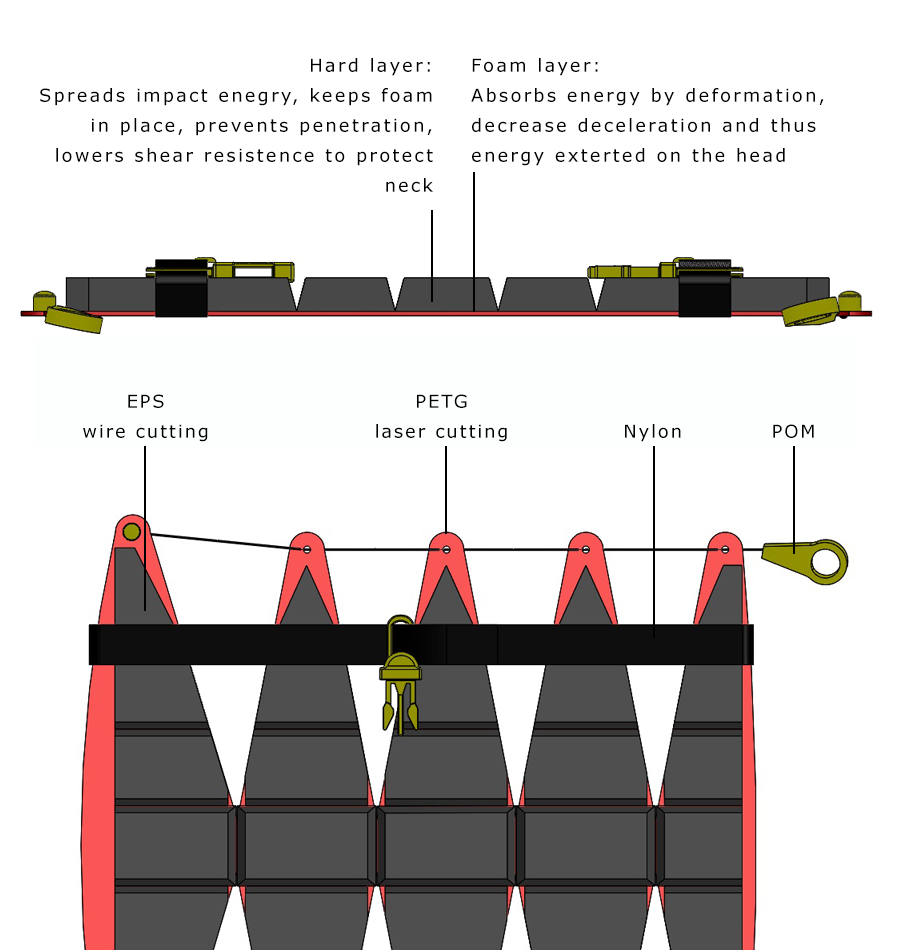
<style>
.page{position:relative;width:900px;height:950px;background:#ffffff}
.page>*{position:absolute;margin:0}
.t1{font:18px/30px "Verdana";letter-spacing:0.12em;color:#000000}
.t2{font:18px/30px "Verdana";letter-spacing:0.1em;color:#000000}
.t3{font:18px "Verdana";letter-spacing:0.1em;color:#000000}
</style>
<div class="page">
<p class="t1" style="left:40px;top:58px;width:393px;height:134px;text-align:right">Hard layer:<br>Spreads impact enegry, keeps foam in place, prevents penetration, lowers shear resistence to protect neck</p>
<p class="t1" style="left:471px;top:58px;width:353px;height:108px">Foam layer:<br>Absorbs energy by deformation, decrease deceleration and thus energy exterted on the head</p>
<p class="t2" style="left:83px;top:394px;width:125px;height:48px;text-align:center">EPS<br>wire cutting</p>
<p class="t2" style="left:376px;top:394px;width:131px;height:48px;text-align:center">PETG<br>laser cutting</p>
<p class="t3" style="left:625px;top:424px;width:56px;height:18px">Nylon</p>
<p class="t3" style="left:773px;top:424px;width:41px;height:14px">POM</p>
</div>
